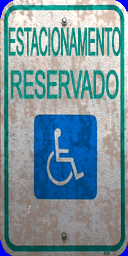
<style>
.page{position:relative;width:128px;height:256px}
.page>*{position:absolute;margin:0}
.t1{font:38.4px "ArialMT";letter-spacing:-0.025em;color:#078c80;font-weight:bold;scale:0.32 1}
.t2{font:38.4px "ArialMT";letter-spacing:-0.025em;color:#078c80;font-weight:bold;scale:0.46 1}
</style>
<div class="page">
<p class="t1" style="left:8px;top:27px;width:113px;height:30px">ESTACIONAMENTO</p>
<p class="t2" style="left:10px;top:69px;width:109px;height:31px">RESERVADO</p>
</div>
